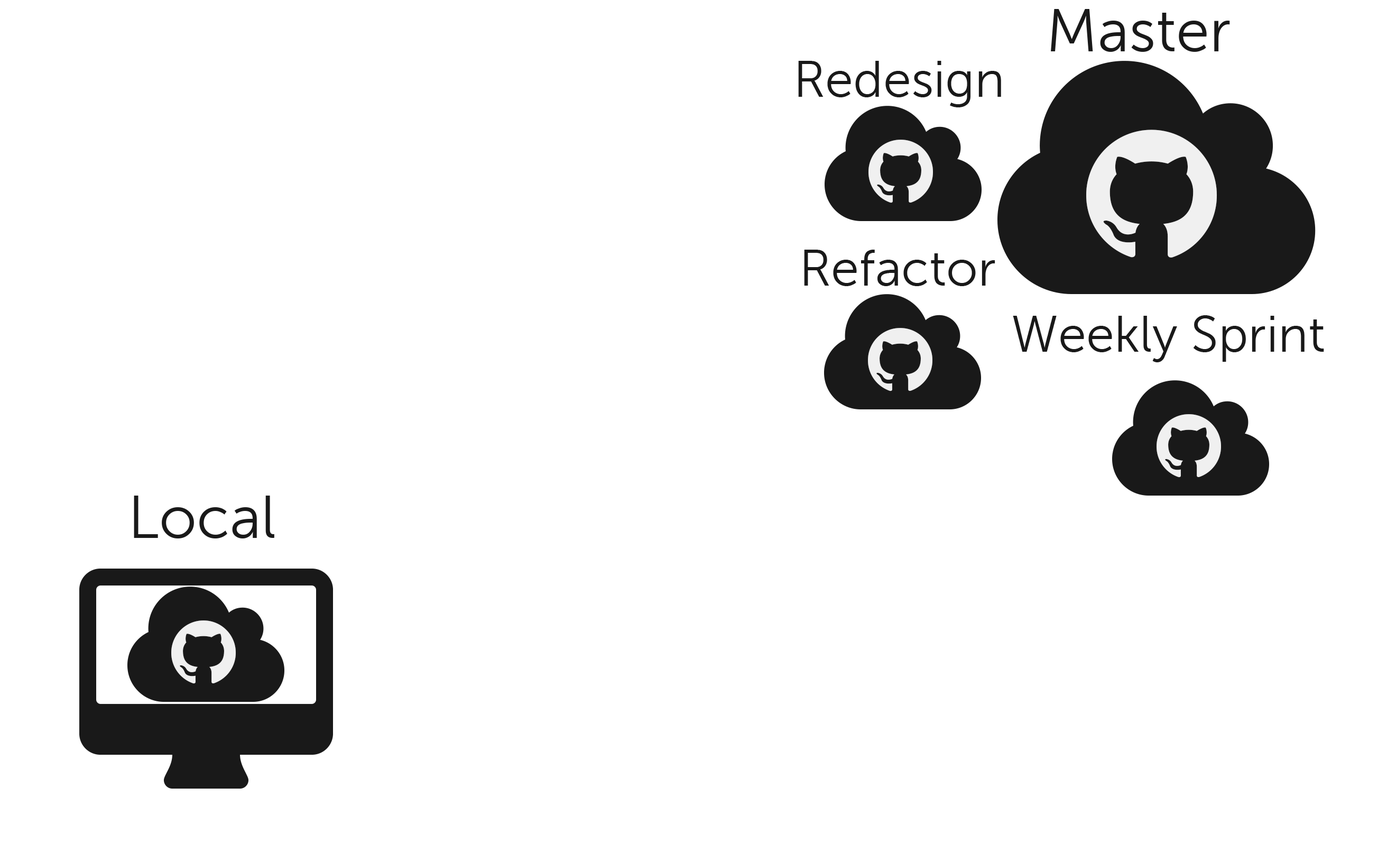
<style>
.page{position:relative;width:1387px;height:860px;background:#ffffff}
.page>*{position:absolute;margin:0}
.t1{font:60.4px "MuseoSans-300";color:#191919}
.t2{font:50.8px "MuseoSans-300";color:#191919}
</style>
<div class="page">
<p class="t1" style="left:1051px;top:9px;width:179px;height:43px">Master</p>
<p class="t2" style="left:798px;top:61px;width:203px;height:46px">Redesign</p>
<p class="t2" style="left:804px;top:250px;width:191px;height:36px">Refactor</p>
<p class="t2" style="left:1013px;top:315px;width:311px;height:47px">Weekly Sprint</p>
<p class="t1" style="left:134px;top:495px;width:140px;height:43px">Local</p>
</div>
